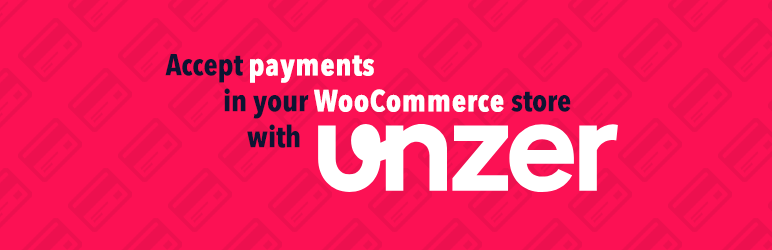
<style>
.page{position:relative;width:772px;height:250px;background:#fc1154}
.page>*{position:absolute;margin:0}
.t1{font:30px "AvenirNextCondensed-Bold";color:#ffffff;font-weight:bold}
.t2{font:30px/30px "AvenirNextCondensed-Bold";color:#0d1432}
.t3{font:30px "AvenirNextCondensed-Bold";color:#0d1432}
</style>
<div class="page">
<p class="t1" style="left:165px;top:54px;width:406px;height:94px;text-align:center"><span class="t2">A</span><span class="t3">ccept </span>payments <br><span class="t3">       in your </span>WooCommerce<span class="t3"> store <br>with</span></p>
</div>
